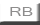
<style>
.page{position:relative;width:40px;height:25px;background:#ffffff}
.page>*{position:absolute;margin:0}
.t1{font:13.8px "Shruti";color:#8e8d8d;scale:1.36 1}
</style>
<div class="page">
<p class="t1" style="left:10px;top:7px;width:23px;height:9px">RB</p>
</div>
